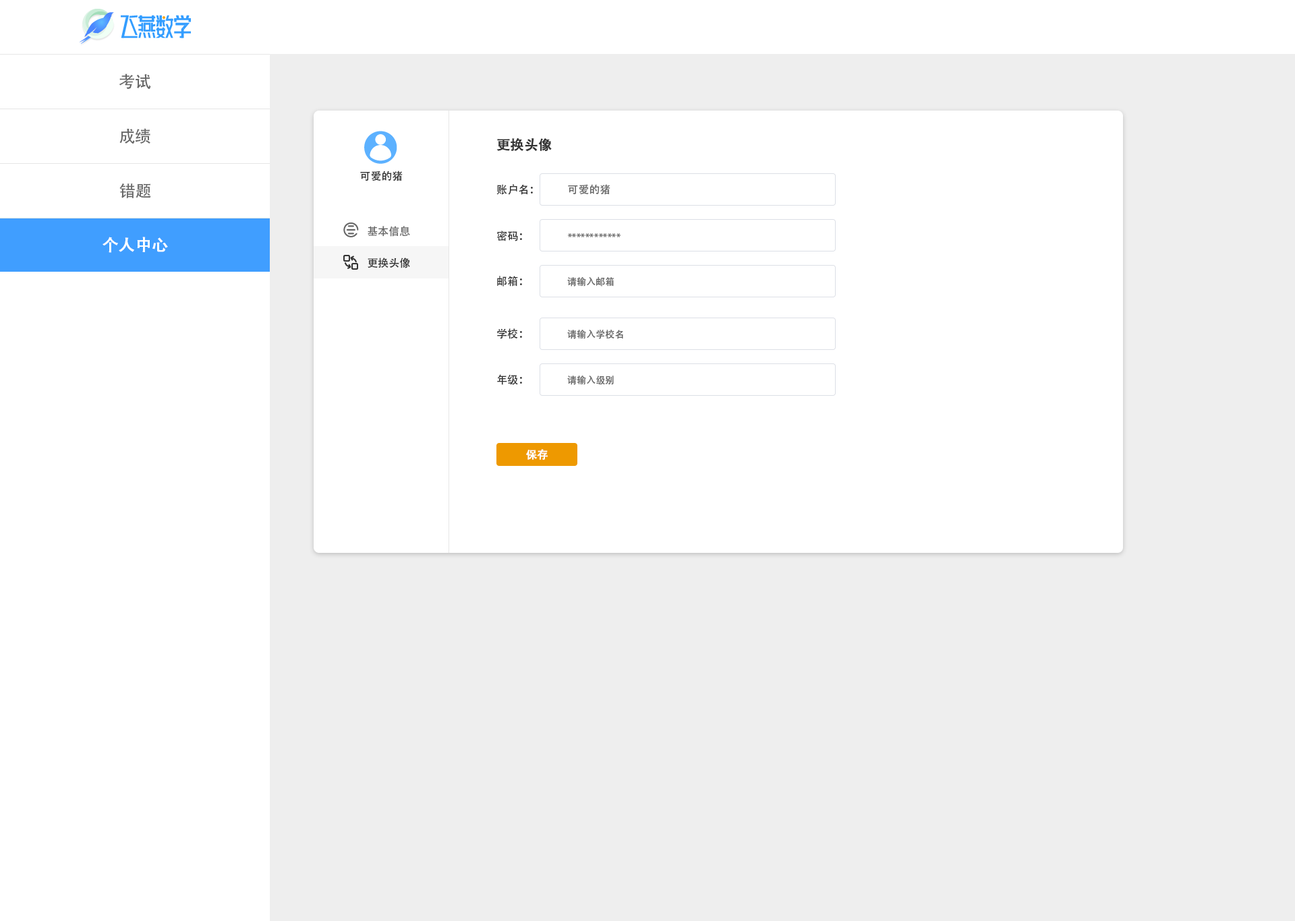
<style>
.page{position:relative;width:1295px;height:921px;background:#ffffff}
.page>*{position:absolute;margin:0}
.t1{font:16.2px "AdobeHeitiStd-Regular";color:#666666}
.t2{font:13.5px "AdobeHeitiStd-Regular";color:#333333;font-weight:bold}
.t3{font:10.8px "AdobeHeitiStd-Regular";color:#333333}
.t4{font:10.8px "AdobeHeitiStd-Regular";color:#666666}
.t5{font:9.4px "AdobeHeitiStd-Regular";color:#666666}
.t6{font:16.2px "AdobeHeitiStd-Regular";color:#ffffff;font-weight:bold}
.t7{font:10.8px "AdobeHeitiStd-Regular";color:#ffffff;font-weight:bold}
</style>
<div class="page">
<p class="t1" style="left:119px;top:73px;width:32px;height:16px">考试</p>
<p class="t1" style="left:119px;top:128px;width:31px;height:16px">成绩</p>
<p class="t2" style="left:496px;top:138px;width:56px;height:14px">更换头像</p>
<p class="t3" style="left:360px;top:171px;width:43px;height:10px">可爱的猪</p>
<p class="t1" style="left:119px;top:183px;width:32px;height:15px">错题</p>
<p class="t3" style="left:496px;top:184px;width:37px;height:11px">账户名：</p>
<p class="t4" style="left:568px;top:184px;width:42px;height:11px">可爱的猪</p>
<p class="t4" style="left:367px;top:226px;width:43px;height:11px">基本信息</p>
<p class="t3" style="left:496px;top:231px;width:26px;height:10px">密码：</p>
<p class="t5" style="left:568px;top:233px;width:52px;height:4px">************</p>
<p class="t6" style="left:102px;top:237px;width:66px;height:16px">个人中心</p>
<p class="t3" style="left:367px;top:258px;width:43px;height:10px">更换头像</p>
<p class="t3" style="left:497px;top:276px;width:25px;height:11px">邮箱：</p>
<p class="t5" style="left:567px;top:276px;width:47px;height:11px">请输入邮箱</p>
<p class="t3" style="left:497px;top:328px;width:25px;height:11px">学校：</p>
<p class="t5" style="left:567px;top:330px;width:56px;height:9px">请输入学校名</p>
<p class="t3" style="left:497px;top:374px;width:25px;height:11px">年级：</p>
<p class="t5" style="left:567px;top:376px;width:47px;height:9px">请输入级别</p>
<p class="t7" style="left:526px;top:449px;width:22px;height:11px">保存</p>
</div>
